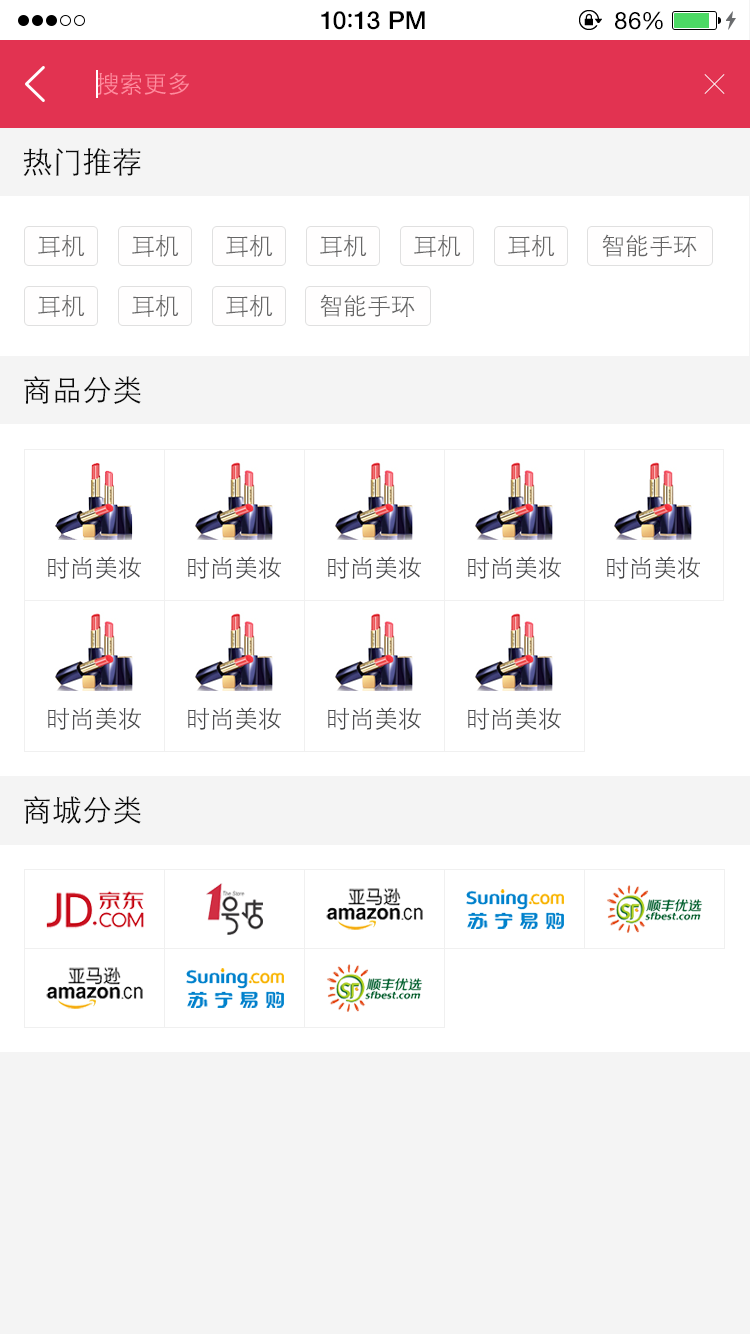
<style>
.page{position:relative;width:750px;height:1334px;background:#ffffff}
.page>*{position:absolute;margin:0}
.t1{font:25px "HelveticaNeue-Medium";letter-spacing:0.015em;color:#000000}
.t2{font:25px "ArialRoundedMTBold";letter-spacing:0.015em;color:#000000}
.t3{font:24px "HelveticaNeue";letter-spacing:0.03em;color:#000000}
.t4{font:24px "STXihei";color:#ff8c9f}
.t5{font:30px "STXihei";color:#0a0a0a}
.t6{font:24px "STXihei";color:#666666}
.t7{font:24px "STXihei";color:#48484a}
</style>
<div class="page">
<p class="t1" style="left:321px;top:11px;width:104px;height:19px">10<span class="t2">:</span>13 PM</p>
<p class="t3" style="left:615px;top:11px;width:48px;height:19px">86%</p>
<p class="t4" style="left:96px;top:72px;width:93px;height:23px">搜索更多</p>
<p class="t5" style="left:23px;top:148px;width:118px;height:28px">热门推荐</p>
<p class="t6" style="left:38px;top:234px;width:47px;height:23px">耳机</p>
<p class="t6" style="left:132px;top:234px;width:47px;height:23px">耳机</p>
<p class="t6" style="left:226px;top:234px;width:47px;height:23px">耳机</p>
<p class="t6" style="left:320px;top:234px;width:47px;height:23px">耳机</p>
<p class="t6" style="left:414px;top:234px;width:47px;height:23px">耳机</p>
<p class="t6" style="left:508px;top:234px;width:47px;height:23px">耳机</p>
<p class="t6" style="left:602px;top:234px;width:95px;height:23px">智能手环</p>
<p class="t6" style="left:38px;top:294px;width:47px;height:23px">耳机</p>
<p class="t6" style="left:132px;top:294px;width:47px;height:23px">耳机</p>
<p class="t6" style="left:226px;top:294px;width:47px;height:23px">耳机</p>
<p class="t6" style="left:320px;top:294px;width:95px;height:23px">智能手环</p>
<p class="t5" style="left:24px;top:376px;width:117px;height:28px">商品分类</p>
<p class="t7" style="left:48px;top:556px;width:93px;height:23px">时尚美妆</p>
<p class="t7" style="left:188px;top:556px;width:93px;height:23px">时尚美妆</p>
<p class="t7" style="left:328px;top:556px;width:93px;height:23px">时尚美妆</p>
<p class="t7" style="left:468px;top:556px;width:93px;height:23px">时尚美妆</p>
<p class="t7" style="left:607px;top:556px;width:93px;height:23px">时尚美妆</p>
<p class="t7" style="left:48px;top:707px;width:93px;height:23px">时尚美妆</p>
<p class="t7" style="left:188px;top:707px;width:93px;height:23px">时尚美妆</p>
<p class="t7" style="left:328px;top:707px;width:93px;height:23px">时尚美妆</p>
<p class="t7" style="left:468px;top:707px;width:93px;height:23px">时尚美妆</p>
<p class="t5" style="left:24px;top:796px;width:117px;height:28px">商城分类</p>
</div>
